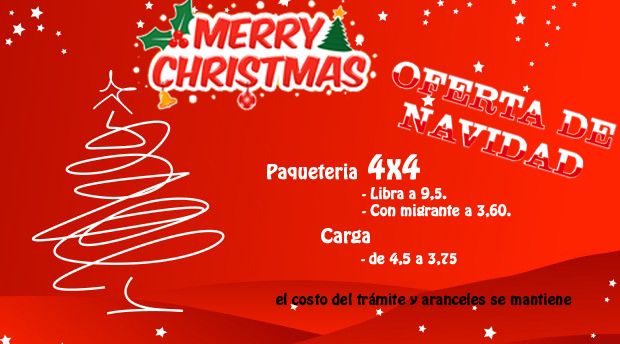
<style>
.page{position:relative;width:620px;height:344px}
.page>*{position:absolute;margin:0}
.t1{font:18px "HoboStd";color:#ffffff;font-weight:bold}
.t2{font:30px "HoboStd";color:#ffffff;font-weight:bold}
.t3{font:14px "HoboStd";color:#ffffff;font-weight:bold}
.t4{font:18px "HoboStd";color:#fffefe;font-weight:bold}
.t5{font:14px "HoboStd";color:#000000;font-weight:bold}
</style>
<div class="page">
<p class="t1" style="left:267px;top:154px;width:153px;height:26px">Paqueteria<span class="t2"> 4x4</span></p>
<p class="t3" style="left:362px;top:186px;width:149px;height:32px">- Libra a 9,5.<br>- Con migrante a 3,60.</p>
<p class="t4" style="left:321px;top:228px;width:49px;height:16px">Carga</p>
<p class="t3" style="left:361px;top:252px;width:96px;height:14px">- de 4,5 a 3,75</p>
<p class="t5" style="left:275px;top:292px;width:297px;height:14px">el costo del trámite y aranceles se mantiene</p>
</div>
